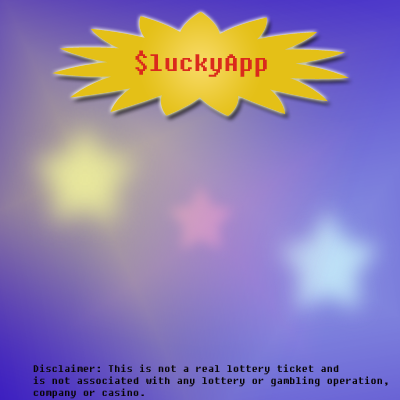
<style>
.page{position:relative;width:400px;height:400px}
.page>*{position:absolute;margin:0}
.t1{font:24px "Fixedsys";color:#da2a1c}
.t2{font:10px "Fixedsys";color:#080505}
</style>
<div class="page">
<p class="t1" style="left:135px;top:50px;width:132px;height:27px">$luckyApp</p>
<p class="t2" style="left:33px;top:364px;width:355px;height:35px">Disclaimer: This is not a real lottery ticket and <br>is not associated with any lottery or gambling operation,<br>company or casino.</p>
</div>
